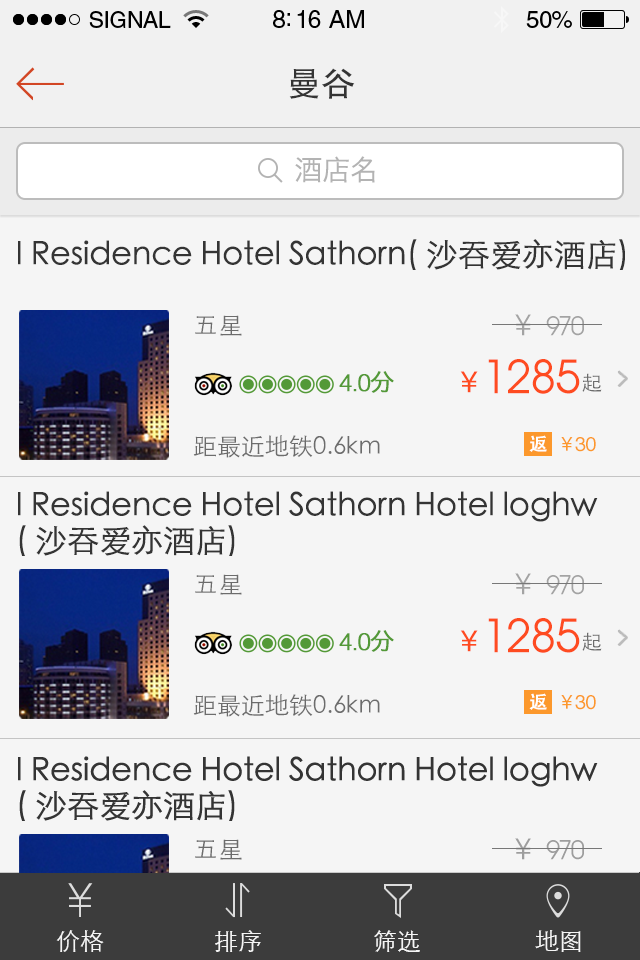
<style>
.page{position:relative;width:640px;height:960px;background:#f5f5f5}
.page>*{position:absolute;margin:0}
.t1{font:34px "STHeitiSC-Medium";color:#343434}
.t2{font:28px "HiraginoSansGB-W3";letter-spacing:-0.01em;color:#b3b3b3}
.t3{font:32px "STHeitiSC-Light";letter-spacing:-0.03em;color:#343434;font-weight:bold}
.t4{font:24px "STHeitiSC-Light";letter-spacing:0.05em;color:#6c6c6c}
.t5{font:30px "STHeitiSC-Light";color:#a3a3a3}
.t6{font:26px "AtillaNormal";letter-spacing:-0.02em;color:#a3a3a3}
.t7{font:46px "AtillaNormal";color:#fe4b20}
.t8{font:24px "Helvetica-Light";letter-spacing:-0.06em;color:#539937;font-weight:bold}
.t9{font:24px "HiraginoSansGB-W3";color:#539937;font-weight:bold}
.t10{font:30px "STHeitiSC-Medium";color:#fe4b20}
.t11{font:20px "STHeitiSC-Light";letter-spacing:-0.04em;color:#6c6c6c}
.t12{font:24px "STHeitiSC-Light";color:#6c6c6c}
.t13{font:18px "STHeitiSC-Medium";letter-spacing:0.1em;color:#ffffff;font-weight:bold}
.t14{font:20px "STHeitiSC-Medium";letter-spacing:-0.04em;color:#fc982c}
.t15{font:20px "Helvetica";letter-spacing:-0.04em;color:#fc982c}
.t16{font:32px/35.1px "STHeitiSC-Light";letter-spacing:-0.03em;color:#343434;font-weight:bold}
.t17{font:24px "STHeitiSC-Light";color:#f5f5f5}
</style>
<div class="page">
<p class="t1" style="left:289px;top:68px;width:66px;height:31px">曼谷</p>
<p class="t2" style="left:295px;top:156px;width:80px;height:27px">酒店名</p>
<p class="t3" style="left:18px;top:239px;width:607px;height:31px">I Residence Hotel Sathorn( 沙吞爱亦酒店)</p>
<p class="t4" style="left:195px;top:315px;width:47px;height:21px">五星</p>
<p class="t5" style="left:515px;top:314px;width:16px;height:22px">￥</p>
<p class="t6" style="left:546px;top:316px;width:38px;height:20px">970</p>
<p class="t7" style="left:488px;top:359px;width:92px;height:35px">1285</p>
<p class="t8" style="left:339px;top:371px;width:55px;height:22px">4.0<span class="t9">分</span></p>
<p class="t10" style="left:460px;top:371px;width:18px;height:22px">￥</p>
<p class="t11" style="left:582px;top:373px;width:20px;height:19px">起</p>
<p class="t12" style="left:193px;top:435px;width:187px;height:23px">距最近地铁0.6km</p>
<p class="t13" style="left:529px;top:435px;width:18px;height:17px">返</p>
<p class="t14" style="left:561px;top:437px;width:12px;height:14px">￥</p>
<p class="t15" style="left:575px;top:437px;width:21px;height:15px">30</p>
<p class="t16" style="left:18px;top:491px;width:580px;height:65px">I Residence Hotel Sathorn Hotel loghw<br>( 沙吞爱亦酒店)</p>
<p class="t4" style="left:195px;top:574px;width:47px;height:21px">五星</p>
<p class="t5" style="left:515px;top:573px;width:16px;height:22px">￥</p>
<p class="t6" style="left:546px;top:575px;width:38px;height:20px">970</p>
<p class="t8" style="left:339px;top:630px;width:55px;height:22px">4.0<span class="t9">分</span></p>
<p class="t10" style="left:460px;top:630px;width:18px;height:22px">￥</p>
<p class="t7" style="left:488px;top:618px;width:92px;height:35px">1285</p>
<p class="t11" style="left:582px;top:632px;width:20px;height:19px">起</p>
<p class="t12" style="left:193px;top:694px;width:187px;height:23px">距最近地铁0.6km</p>
<p class="t13" style="left:529px;top:693px;width:18px;height:17px">返</p>
<p class="t14" style="left:561px;top:695px;width:12px;height:14px">￥</p>
<p class="t15" style="left:575px;top:695px;width:21px;height:15px">30</p>
<p class="t17" style="left:56px;top:930px;width:48px;height:22px">价格</p>
<p class="t17" style="left:215px;top:930px;width:46px;height:22px">排序</p>
<p class="t17" style="left:374px;top:930px;width:46px;height:22px">筛选</p>
<p class="t17" style="left:535px;top:930px;width:46px;height:22px">地图</p>
</div>
